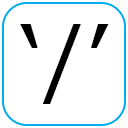
<style>
.page{position:relative;width:128px;height:128px;background:#ffffff}
.page>*{position:absolute;margin:0}
.t1{font:87.5px "Verdana";color:#000000}
</style>
<div class="page">
<p class="t1" style="left:20px;top:24px;width:89px;height:80px">‘/’</p>
</div>
